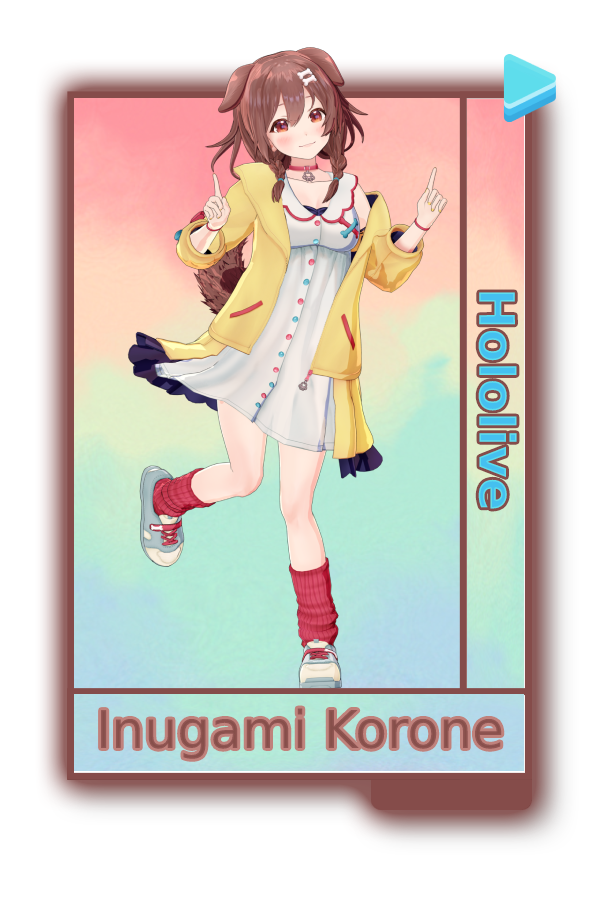
<style>
.page{position:relative;width:600px;height:900px;background:#ffffff}
.page>*{position:absolute;margin:0}
.t1{font:48.8px "MADETOMMY-Bold";color:#45c0f0}
.t2{font:52px "CoolveticaRg-Regular";color:#8d534f}
</style>
<div class="page">
<p class="t1" style="left:478px;top:292px;width:39px;height:217px;rotate:90deg">Hololive</p>
<p class="t2" style="left:101px;top:708px;width:401px;height:51px">Inugami Korone</p>
</div>
